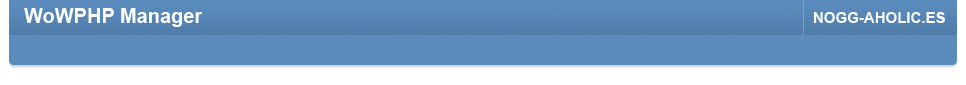
<style>
.page{position:relative;width:966px;height:85px;background:#5a8cbe}
.page>*{position:absolute;margin:0}
.t1{font:20px "Arial-BoldMT";color:#fefefe}
.t2{font:15px "Arial-BoldMT";color:#fefefe}
</style>
<div class="page">
<p class="t1" style="left:24px;top:8px;width:179px;height:19px">WoWPHP Manager</p>
<p class="t2" style="left:814px;top:12px;width:131px;height:11px">NOGG-AHOLIC.ES</p>
</div>
